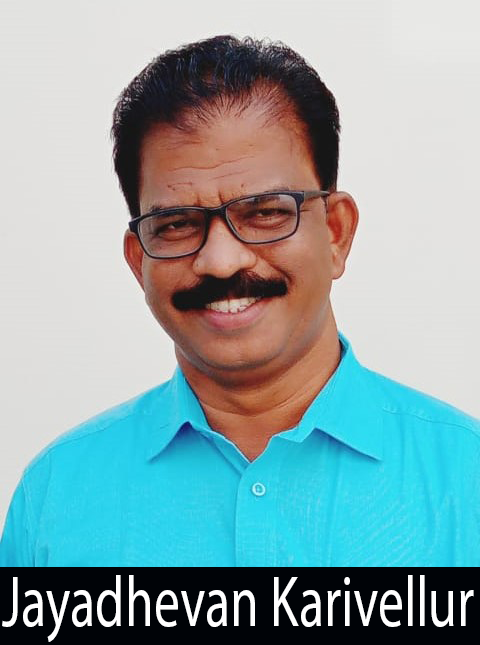
<style>
.page{position:relative;width:480px;height:645px}
.page>*{position:absolute;margin:0}
.t1{font:43.5px "MyriadPro-Regular";color:#ffffff;scale:0.72 1}
</style>
<div class="page">
<p class="t1" style="left:2px;top:575px;width:472px;height:67px">Jayadhevan Karivellur</p>
</div>
